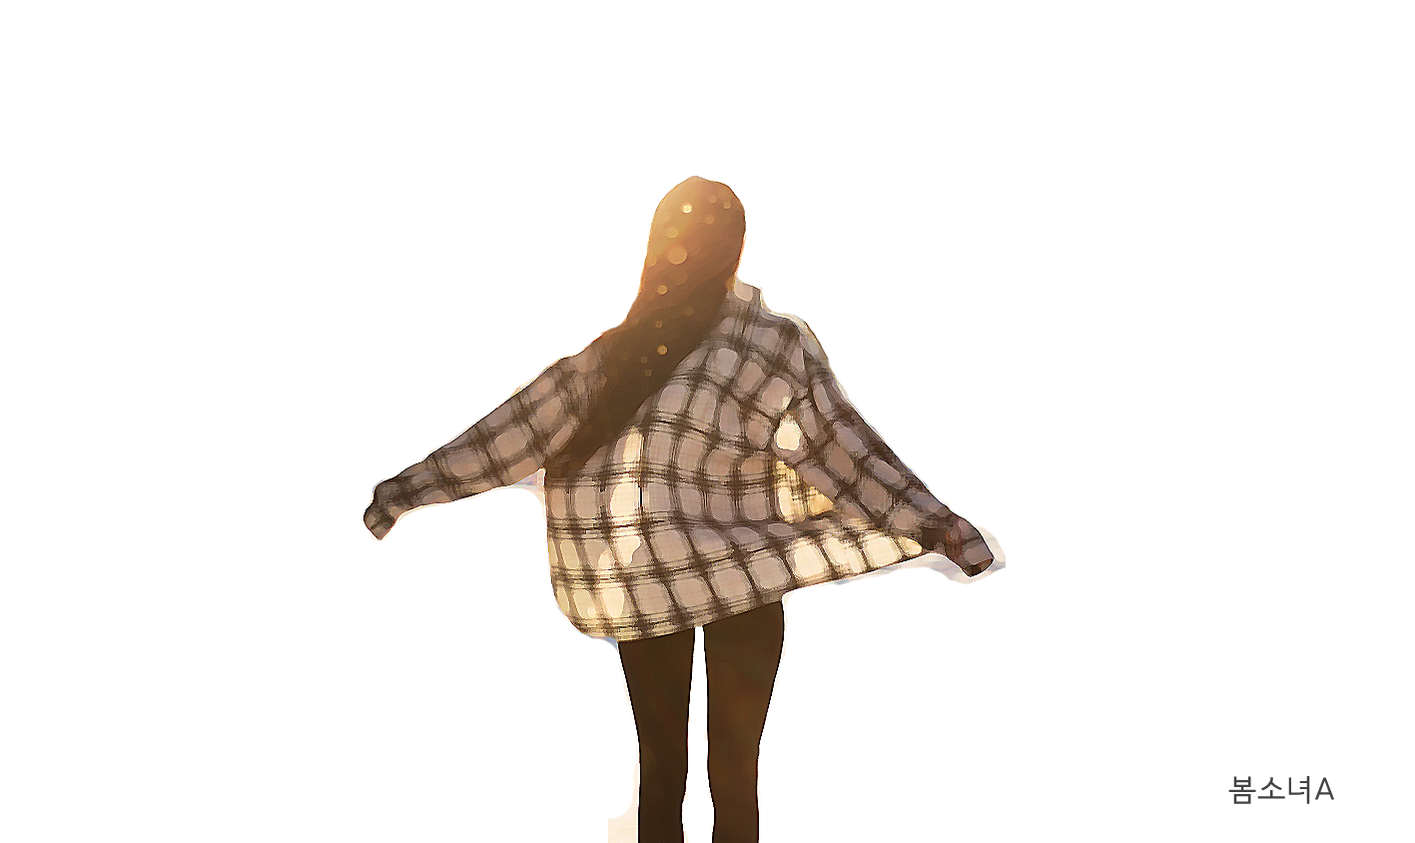
<style>
.page{position:relative;width:1415px;height:843px;background:#ffffff}
.page>*{position:absolute;margin:0}
.t1{font:30px "HCRDotum";color:#424242}
</style>
<div class="page">
<p class="t1" style="left:1228px;top:776px;width:106px;height:28px">봄소녀A</p>
</div>
